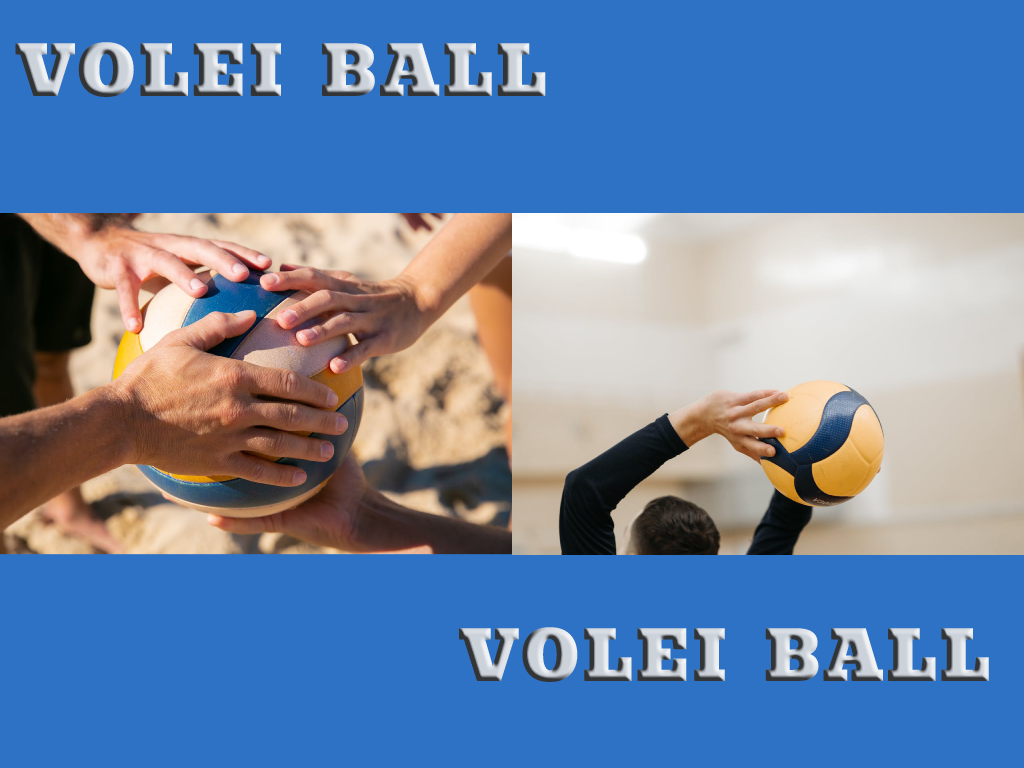
<style>
.page{position:relative;width:1024px;height:768px;background:#2e72c6}
.page>*{position:absolute;margin:0}
.t1{font:150px "Bevan-Regular";font-variant:small-caps;font-weight:bold}
</style>
<div class="page">
<p class="t1" style="left:15px;top:42px;width:531px;height:55px">volei ball</p>
<p class="t1" style="left:459px;top:627px;width:530px;height:55px">volei ball</p>
</div>
